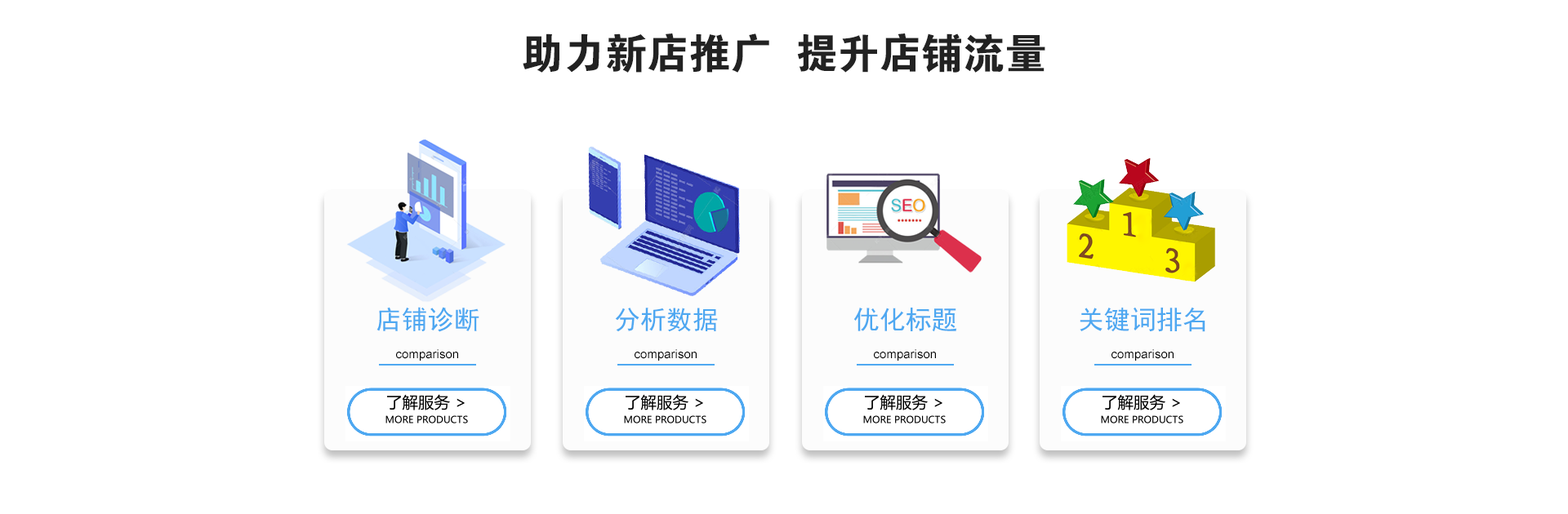
<style>
.page{position:relative;width:1568px;height:514px;background:#ffffff}
.page>*{position:absolute;margin:0}
.t1{font:41.9px "FZDHTJW--GB1-0";color:#222222}
.t2{font:26.1px "SimHei";color:#4ea8f1}
.t3{font:12.2px "ArialMT";color:#000000}
</style>
<div class="page">
<p class="t1" style="left:523px;top:33px;width:522px;height:40px">助力新店推广  提升店铺流量</p>
<p class="t2" style="left:376px;top:307px;width:103px;height:25px">店铺诊断</p>
<p class="t2" style="left:615px;top:308px;width:103px;height:24px">分析数据</p>
<p class="t2" style="left:853px;top:308px;width:104px;height:24px">优化标题</p>
<p class="t2" style="left:1080px;top:307px;width:125px;height:25px">关键词排名</p>
<p class="t3" style="left:396px;top:350px;width:62px;height:11px">comparison</p>
<p class="t3" style="left:635px;top:350px;width:62px;height:11px">comparison</p>
<p class="t3" style="left:874px;top:350px;width:62px;height:11px">comparison</p>
<p class="t3" style="left:1111px;top:350px;width:63px;height:11px">comparison</p>
</div>
